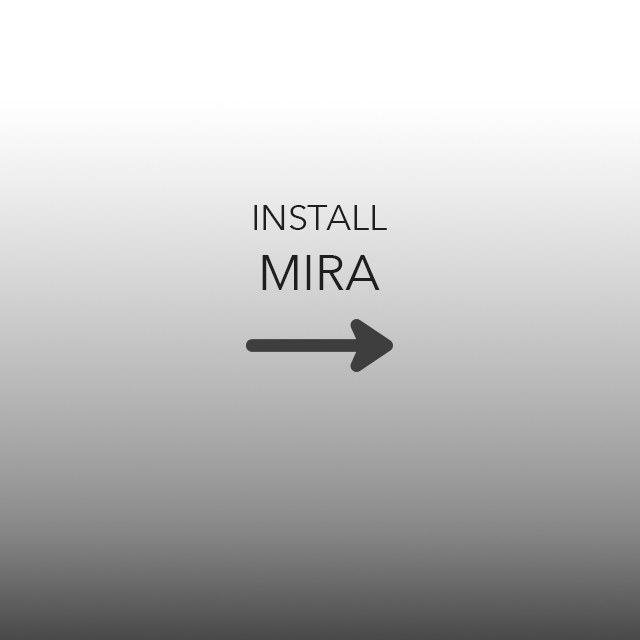
<style>
.page{position:relative;width:640px;height:640px}
.page>*{position:absolute;margin:0}
.t1{font:36px "AvenirNext-Regular";color:#1e1e1e}
.t2{font:50px "AvenirNext-Regular";color:#1e1e1e}
</style>
<div class="page">
<p class="t1" style="left:254px;top:205px;width:133px;height:85px;text-align:center">INSTALL<br><span class="t2">MIRA</span></p>
</div>
